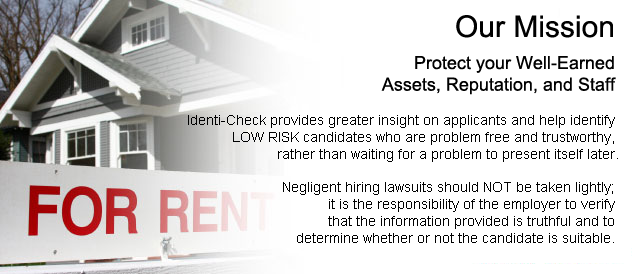
<style>
.page{position:relative;width:640px;height:274px;background:#ffffff}
.page>*{position:absolute;margin:0}
.t1{font:30px "ArialMT";color:#000000}
.t2{font:18px "ArialMT";color:#000000}
.t3{font:14px "ArialMT";color:#000000}
</style>
<div class="page">
<p class="t1" style="left:456px;top:15px;width:157px;height:23px">Our Mission</p>
<p class="t2" style="left:381px;top:56px;width:235px;height:39px;text-align:right">Protect your Well-Earned<br>Assets, Reputation, and Staff</p>
<p class="t3" style="left:188px;top:115px;width:430px;height:128px;text-align:right">Identi-Check provides greater insight on applicants and help identify <br>LOW RISK candidates who are problem free and trustworthy, <br>rather than waiting for a problem to present itself later.<br><br>Negligent hiring lawsuits should NOT be taken lightly; <br>it is the responsibility of the employer to verify <br>that the information provided is truthful and to <br>determine whether or not the candidate is suitable.</p>
</div>
